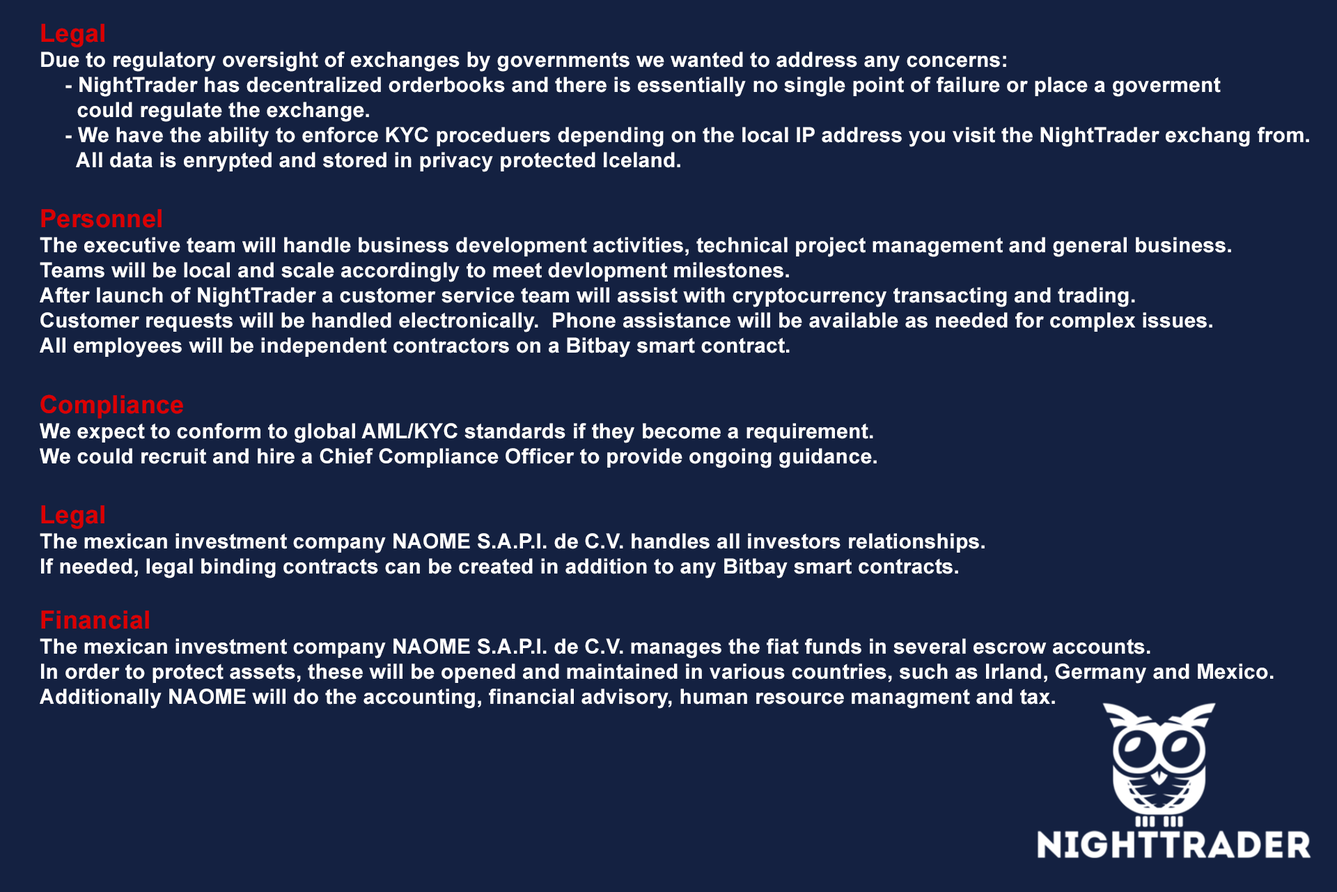
<style>
.page{position:relative;width:1337px;height:892px;background:#142141}
.page>*{position:absolute;margin:0}
.t1{font:20.9px "Arial-BoldMT";letter-spacing:0.01em;color:#ffffff}
.t2{font:25.1px "Arial-BoldMT";letter-spacing:0.01em;color:#db0000}
</style>
<div class="page">
<p class="t1" style="left:40px;top:24px;width:1270px;height:684px"><span class="t2">Legal</span><br>Due to regulatory oversight of exchanges by governments we wanted to address any concerns:<br> - NightTrader has decentralized orderbooks and there is essentially no single point of failure or place a goverment  <br>    could regulate the exchange.<br> - We have the ability to enforce KYC proceduers depending on the local IP address you visit the NightTrader exchang from.     All data is enrypted and stored in privacy protected Iceland.<br><br><span class="t2">Personnel</span><br>The executive team will handle business development activities, technical project management and general business.<br>Teams will be local and scale accordingly to meet devlopment milestones. <br>After launch of NightTrader a customer service team will assist with cryptocurrency transacting and trading.<br>Customer requests will be handled electronically.  Phone assistance will be available as needed for complex issues.<br>All employees will be independent contractors on a Bitbay smart contract.<br><br><span class="t2">Compliance<br></span>We expect to conform to global AML/KYC standards if they become a requirement.<br>We could recruit and hire a Chief Compliance Officer to provide ongoing guidance. <br><br><span class="t2">Legal<br></span>The mexican investment company NAOME S.A.P.I. de C.V. handles all investors relationships.<br>If needed, legal binding contracts can be created in addition to any Bitbay smart contracts.<br><br><span class="t2">Financial<br></span>The mexican investment company NAOME S.A.P.I. de C.V. manages the fiat funds in several escrow accounts.<br>In order to protect assets, these will be opened and maintained in various countries, such as Irland, Germany and Mexico.<br>Additionally NAOME will do the accounting, financial advisory, human resource managment and tax.</p>
</div>
